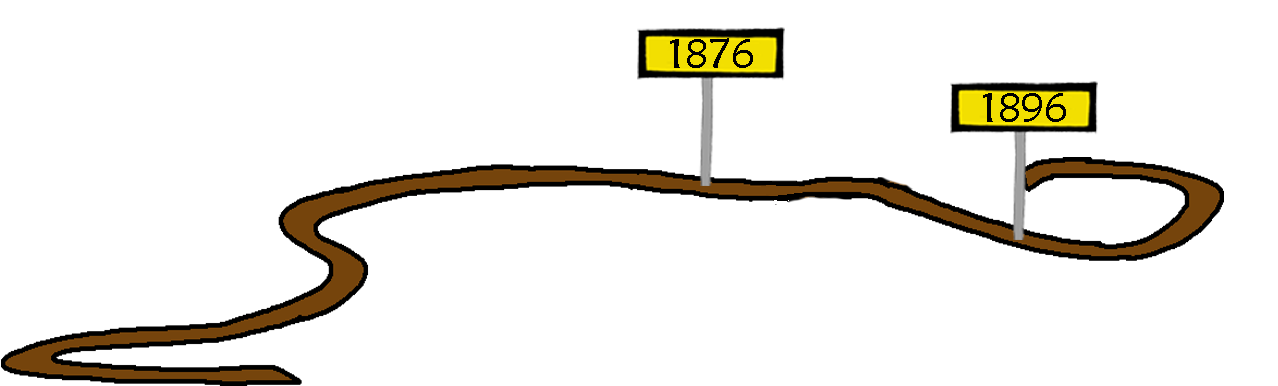
<style>
.page{position:relative;width:1278px;height:386px;background:#ffffff}
.page>*{position:absolute;margin:0}
.t1{font:41.7px "MaiandraGD-Regular";color:#000000}
</style>
<div class="page">
<p class="t1" style="left:670px;top:38px;width:83px;height:30px">1876</p>
<p class="t1" style="left:983px;top:93px;width:83px;height:29px">1896</p>
</div>
